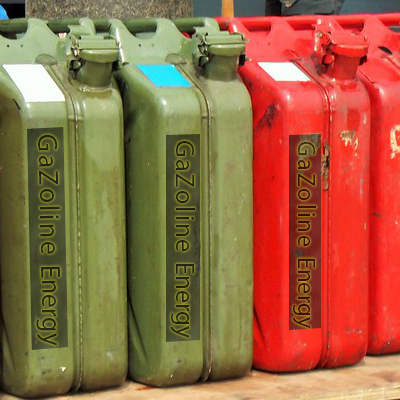
<style>
.page{position:relative;width:400px;height:400px}
.page>*{position:absolute;margin:0}
.t1{font:27.9px "MyriadPro-Regular";letter-spacing:0.08em;color:#232714}
.t2{font:27.9px "MyriadPro-Regular";color:#232714}
.t3{font:26.1px "MyriadPro-Regular";letter-spacing:0.08em;color:#232512}
.t4{font:26.1px "MyriadPro-Regular";color:#232512}
.t5{font:24.7px "MyriadPro-Regular";letter-spacing:0.08em;color:#410f0b}
.t6{font:24.7px "MyriadPro-Regular";color:#410f0b}
</style>
<div class="page">
<p class="t1" style="left:36px;top:134px;width:24px;height:212px;rotate:89deg">GaZoline <span class="t2">Energy</span></p>
<p class="t3" style="left:170px;top:141px;width:25px;height:197px;rotate:90deg">GaZoline <span class="t4">Energy</span></p>
<p class="t5" style="left:292px;top:141px;width:24px;height:188px;rotate:90deg">GaZoline <span class="t6">Energy</span></p>
</div>
